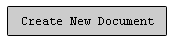
<style>
.page{position:relative;width:175px;height:41px;background:#cccccc}
.page>*{position:absolute;margin:0}
.t1{font:12px "CourierNewPSMT";color:#000000}
</style>
<div class="page">
<p class="t1" style="left:22px;top:17px;width:132px;height:8px">Create New Document</p>
</div>
